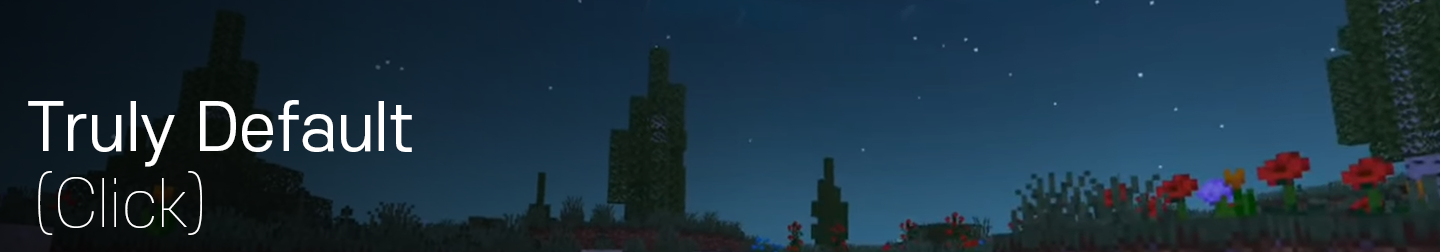
<style>
.page{position:relative;width:1440px;height:252px}
.page>*{position:absolute;margin:0}
.t1{font:64px "S-CoreDream-4Regular";color:#ffffff}
.t2{font:64px "S-CoreDream-1Thin";color:#ffffff}
</style>
<div class="page">
<p class="t1" style="left:28px;top:100px;width:384px;height:67px">Truly Default</p>
<p class="t2" style="left:38px;top:171px;width:164px;height:64px">(Click)</p>
</div>
